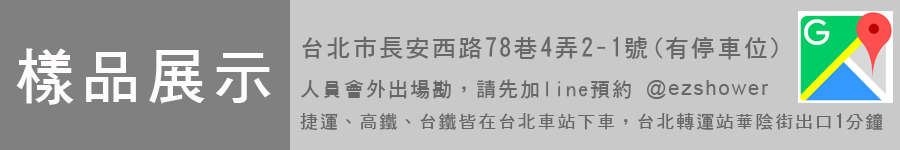
<style>
.page{position:relative;width:900px;height:150px;background:#c9c9c9}
.page>*{position:absolute;margin:0}
.t1{font:18px "DFHei-Bd-HK-BF";letter-spacing:0.1em;color:#686666}
.t2{font:24px "DFHei-Bd-HK-BF";letter-spacing:0.1em;color:#686666}
.t3{font:20px "DFHei-Bd-HK-BF";letter-spacing:0.1em;color:#686666}
.t4{font:20px "ArialMT";letter-spacing:0.1em;color:#686666}
.t5{font:60px "DFHei-Bd-HK-BF";letter-spacing:0.1em;color:#fefcfc}
</style>
<div class="page">
<p class="t1" style="left:300px;top:36px;width:583px;height:94px"><span class="t2">台北市長安西路78巷4弄2-1號(有停車位)<br></span><span class="t3">人員會外出場勘，請先加line預約 </span><span class="t4">@ezshower<br></span>捷運、高鐵、台鐵皆在台北車站下車，台北轉運站華陰街出口1分鐘</p>
<p class="t5" style="left:16px;top:48px;width:255px;height:57px">樣品展示</p>
</div>
